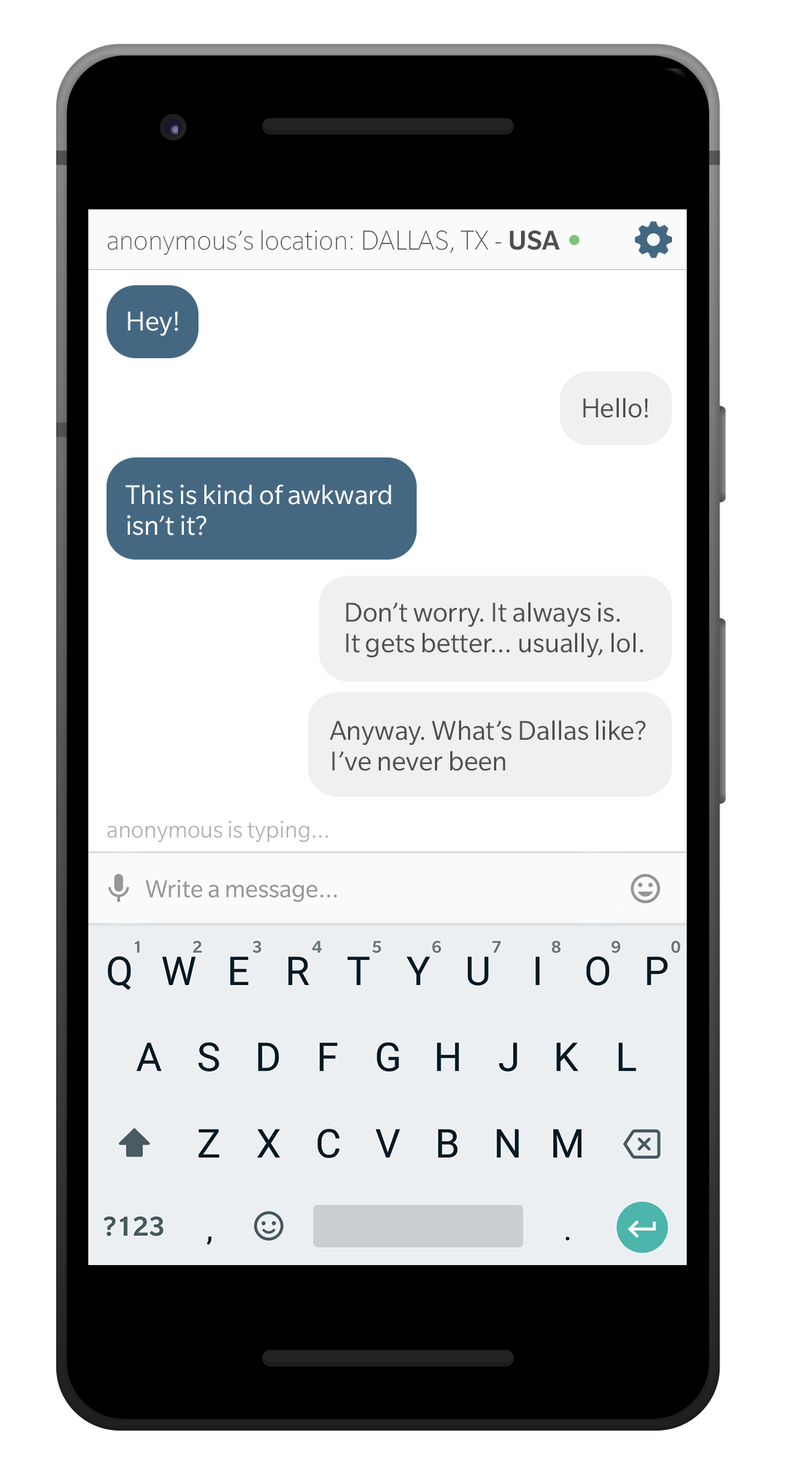
<style>
.page{position:relative;width:810px;height:1473px;background:#ffffff}
.page>*{position:absolute;margin:0}
.t1{font:26px "SlateForOnePlusThin";color:#434343}
.t2{font:26px "SlateForOnePlusMedium";color:#4e4e4e}
.t3{font:26px "SlateForOnePlusBk";color:#fcfcfc}
.t4{font:26px "SlateForOnePlusBk";color:#4e4e4e}
.t5{font:22.4px "SlateForOnePlusLight";color:#aeaeae}
</style>
<div class="page">
<p class="t1" style="left:107px;top:230px;width:452px;height:25px">anonymous’s location: DALLAS, TX - <span class="t2">USA</span></p>
<p class="t3" style="left:128px;top:311px;width:50px;height:25px">Hey!</p>
<p class="t4" style="left:583px;top:398px;width:65px;height:20px">Hello!</p>
<p class="t3" style="left:125px;top:484px;width:266px;height:51px">This is kind of awkward <br>isn’t it?</p>
<p class="t4" style="left:346px;top:602px;width:297px;height:55px">Don’t worry. It always is.<br>It gets better... usually, lol.</p>
<p class="t4" style="left:330px;top:720px;width:316px;height:51px">Anyway. What’s Dallas like?<br>I’ve never been</p>
<p class="t5" style="left:107px;top:821px;width:221px;height:21px">anonymous is typing...</p>
</div>
